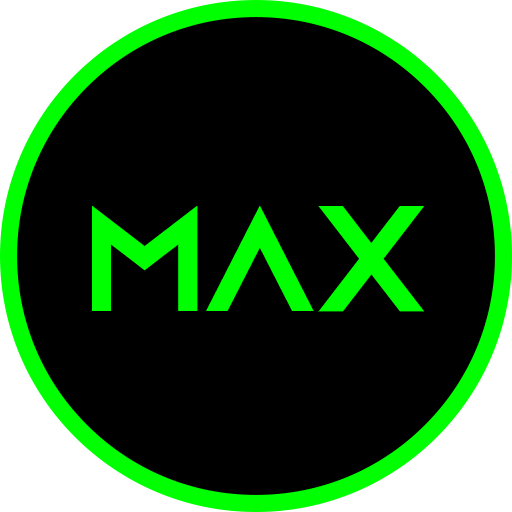
<style>
.page{position:relative;width:512px;height:512px;background:#000000}
.page>*{position:absolute;margin:0}
.t1{font:150px "AzonixRegular";color:#00ff00}
</style>
<div class="page">
<p class="t1" style="left:92px;top:206px;width:332px;height:106px">MAX</p>
</div>
